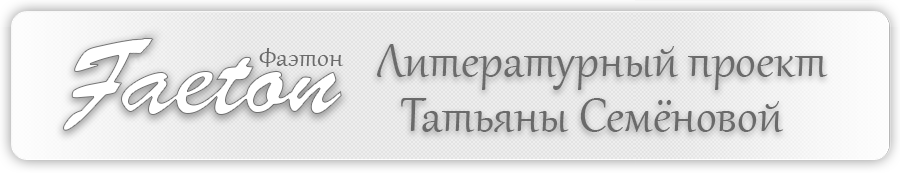
<style>
.page{position:relative;width:900px;height:173px}
.page>*{position:absolute;margin:0}
.t1{font:33.3px "Gabriola";color:#6b6b6b}
.t2{font:58.3px "Gabriola";color:#6b6b6b}
.t3{font:58.3px "Gabriola";color:#6a6a6a}
</style>
<div class="page">
<p class="t1" style="left:259px;top:48px;width:85px;height:19px">Фаэтон</p>
<p class="t2" style="left:377px;top:44px;width:451px;height:46px">Литературный проект</p>
<p class="t3" style="left:401px;top:98px;width:383px;height:34px">Татьяны Семёновой</p>
</div>
